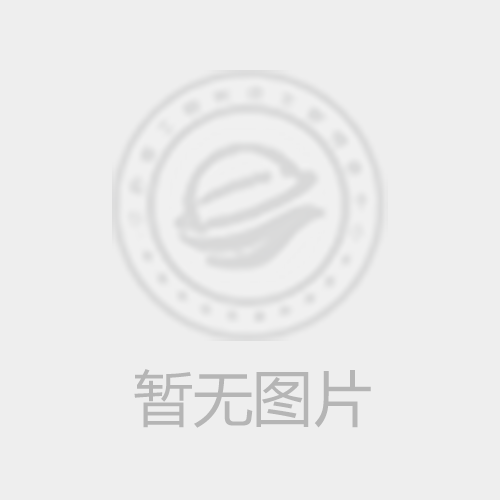
<style>
.page{position:relative;width:500px;height:500px;background:#eeeeee}
.page>*{position:absolute;margin:0}
.t1{font:60px "MicrosoftYaHei";letter-spacing:-0.008em;color:#b5b5b5}
</style>
<div class="page">
<p class="t1" style="left:134px;top:369px;width:237px;height:59px">暂无图片</p>
</div>
